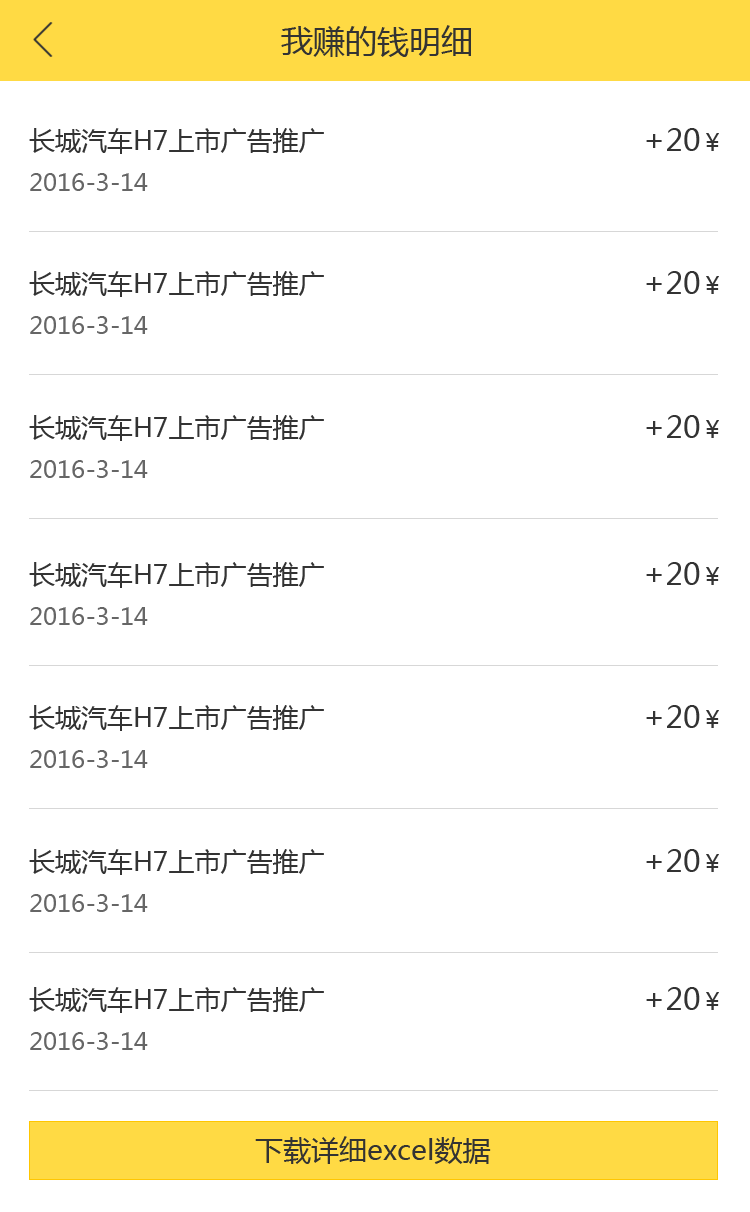
<style>
.page{position:relative;width:750px;height:1212px;background:#ffffff}
.page>*{position:absolute;margin:0}
.t1{font:32px "MicrosoftYaHei";color:#333333}
.t2{font:26px "MicrosoftYaHei";color:#333333}
.t3{font:30px "MicrosoftYaHei";color:#333333}
.t4{font:24px "MicrosoftYaHei";color:#333333}
.t5{font:24px "MicrosoftYaHei";color:#666666}
.t6{font:28px "MicrosoftYaHei";color:#333333}
</style>
<div class="page">
<p class="t1" style="left:281px;top:25px;width:190px;height:32px">我赚的钱明细</p>
<p class="t2" style="left:29px;top:128px;width:295px;height:26px">长城汽车H7上市广告推广</p>
<p class="t3" style="left:646px;top:128px;width:73px;height:23px">+20<span class="t4">￥</span></p>
<p class="t5" style="left:30px;top:173px;width:118px;height:18px">2016-3-14</p>
<p class="t2" style="left:29px;top:271px;width:295px;height:26px">长城汽车H7上市广告推广</p>
<p class="t3" style="left:646px;top:271px;width:73px;height:23px">+20<span class="t4">￥</span></p>
<p class="t5" style="left:30px;top:316px;width:118px;height:18px">2016-3-14</p>
<p class="t2" style="left:29px;top:415px;width:295px;height:26px">长城汽车H7上市广告推广</p>
<p class="t3" style="left:646px;top:415px;width:73px;height:23px">+20<span class="t4">￥</span></p>
<p class="t5" style="left:30px;top:460px;width:118px;height:18px">2016-3-14</p>
<p class="t2" style="left:29px;top:562px;width:295px;height:26px">长城汽车H7上市广告推广</p>
<p class="t3" style="left:646px;top:562px;width:73px;height:23px">+20<span class="t4">￥</span></p>
<p class="t5" style="left:30px;top:607px;width:118px;height:18px">2016-3-14</p>
<p class="t2" style="left:29px;top:705px;width:295px;height:26px">长城汽车H7上市广告推广</p>
<p class="t3" style="left:646px;top:705px;width:73px;height:23px">+20<span class="t4">￥</span></p>
<p class="t5" style="left:30px;top:750px;width:118px;height:18px">2016-3-14</p>
<p class="t2" style="left:29px;top:849px;width:295px;height:26px">长城汽车H7上市广告推广</p>
<p class="t3" style="left:646px;top:849px;width:73px;height:23px">+20<span class="t4">￥</span></p>
<p class="t5" style="left:30px;top:894px;width:118px;height:18px">2016-3-14</p>
<p class="t2" style="left:29px;top:987px;width:295px;height:26px">长城汽车H7上市广告推广</p>
<p class="t3" style="left:646px;top:987px;width:73px;height:23px">+20<span class="t4">￥</span></p>
<p class="t5" style="left:30px;top:1032px;width:118px;height:18px">2016-3-14</p>
<p class="t6" style="left:255px;top:1136px;width:236px;height:28px">下载详细excel数据</p>
</div>
